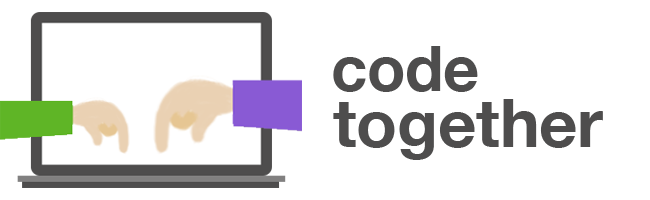
<style>
.page{position:relative;width:650px;height:200px;background:#ffffff}
.page>*{position:absolute;margin:0}
.t1{font:62.5px "HelveticaNeue-Bold";color:#4e4d4d}
.t2{font:66.7px "HelveticaNeue-Bold";color:#4e4d4d}
</style>
<div class="page">
<p class="t1" style="left:333px;top:46px;width:145px;height:46px">code</p>
<p class="t2" style="left:333px;top:99px;width:270px;height:61px">together</p>
</div>
